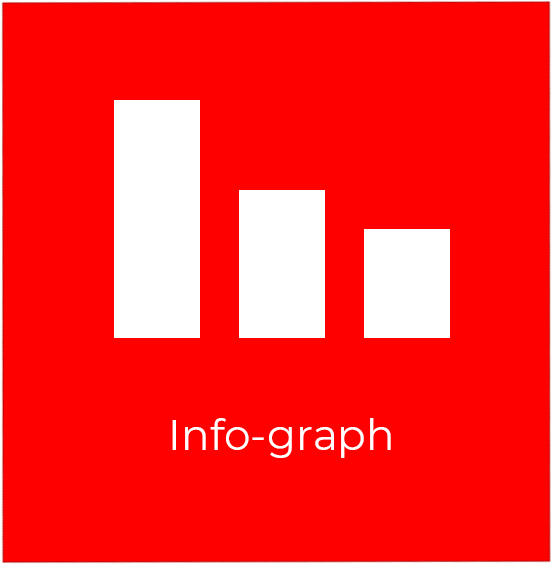
<style>
.page{position:relative;width:552px;height:564px;background:#ff0000}
.page>*{position:absolute;margin:0}
.t1{font:42.2px "Montserrat-Regular";color:#ffffff}
</style>
<div class="page">
<p class="t1" style="left:172px;top:418px;width:219px;height:40px">Info-graph</p>
</div>
